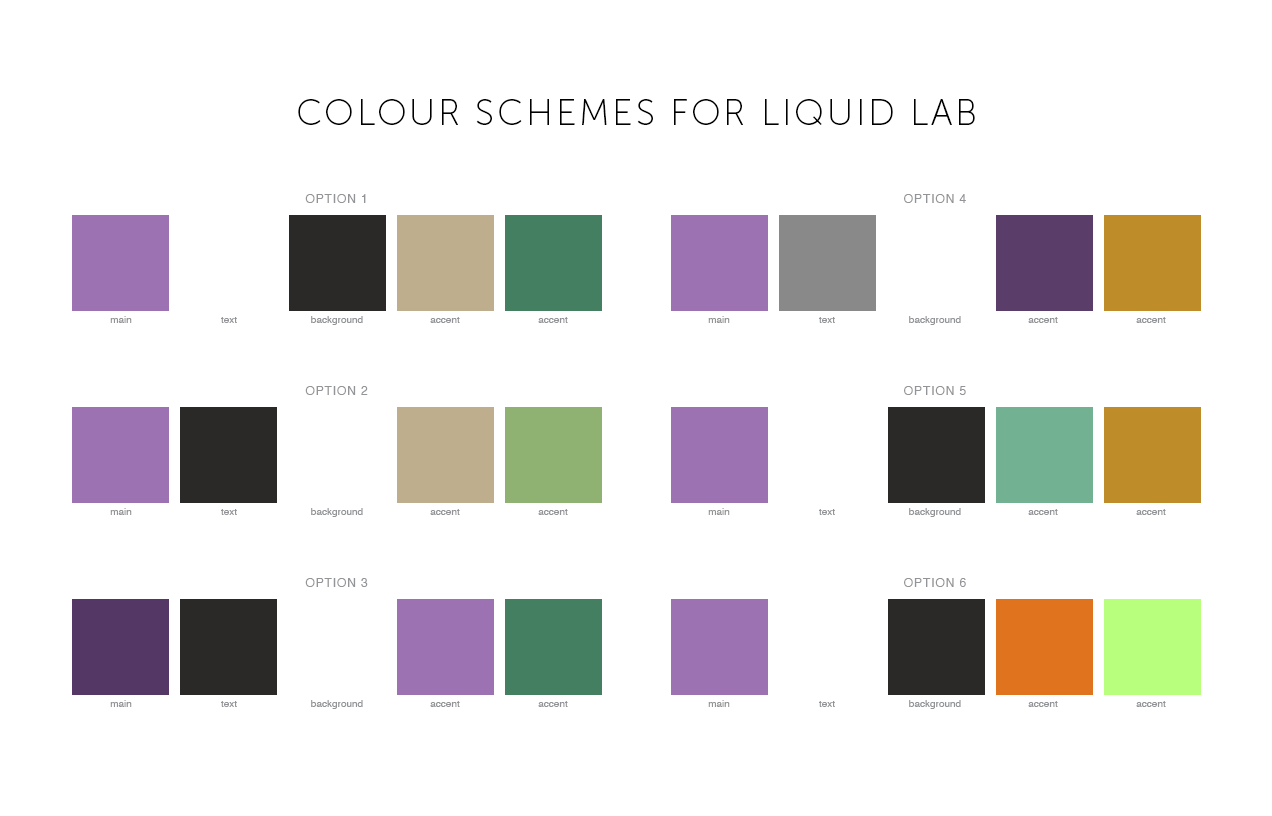
<style>
.page{position:relative;width:1272px;height:816px;background:#ffffff}
.page>*{position:absolute;margin:0}
.t1{font:36px "MuseoSans-100";letter-spacing:0.075em;color:#000000;text-transform:uppercase}
.t2{font:12px "Helvetica";letter-spacing:0.075em;color:#929497;text-transform:uppercase}
.t3{font:10px "Helvetica";color:#929497}
</style>
<div class="page">
<p class="t1" style="left:298px;top:99px;width:677px;height:26px">colour schemes for Liquid lab</p>
<p class="t2" style="left:305px;top:194px;width:61px;height:9px">OPTION 1</p>
<p class="t2" style="left:904px;top:194px;width:62px;height:9px">option 4</p>
<p class="t3" style="left:110px;top:316px;width:22px;height:7px">main</p>
<p class="t3" style="left:221px;top:317px;width:16px;height:6px">text</p>
<p class="t3" style="left:311px;top:316px;width:52px;height:9px">background</p>
<p class="t3" style="left:430px;top:317px;width:30px;height:6px">accent</p>
<p class="t3" style="left:538px;top:317px;width:30px;height:6px">accent</p>
<p class="t3" style="left:708px;top:316px;width:22px;height:7px">main</p>
<p class="t3" style="left:819px;top:317px;width:16px;height:6px">text</p>
<p class="t3" style="left:909px;top:316px;width:52px;height:9px">background</p>
<p class="t3" style="left:1028px;top:317px;width:30px;height:6px">accent</p>
<p class="t3" style="left:1136px;top:317px;width:30px;height:6px">accent</p>
<p class="t2" style="left:305px;top:386px;width:63px;height:9px">Option 2</p>
<p class="t2" style="left:904px;top:386px;width:62px;height:9px">option 5</p>
<p class="t3" style="left:110px;top:508px;width:22px;height:7px">main</p>
<p class="t3" style="left:221px;top:509px;width:16px;height:6px">text</p>
<p class="t3" style="left:311px;top:508px;width:52px;height:9px">background</p>
<p class="t3" style="left:430px;top:509px;width:30px;height:6px">accent</p>
<p class="t3" style="left:538px;top:509px;width:30px;height:6px">accent</p>
<p class="t3" style="left:708px;top:508px;width:22px;height:7px">main</p>
<p class="t3" style="left:819px;top:509px;width:16px;height:6px">text</p>
<p class="t3" style="left:909px;top:508px;width:52px;height:9px">background</p>
<p class="t3" style="left:1028px;top:509px;width:30px;height:6px">accent</p>
<p class="t3" style="left:1136px;top:509px;width:30px;height:6px">accent</p>
<p class="t2" style="left:305px;top:578px;width:63px;height:9px">Option 3</p>
<p class="t2" style="left:904px;top:578px;width:62px;height:9px">option 6</p>
<p class="t3" style="left:110px;top:700px;width:22px;height:7px">main</p>
<p class="t3" style="left:221px;top:701px;width:16px;height:6px">text</p>
<p class="t3" style="left:311px;top:700px;width:52px;height:9px">background</p>
<p class="t3" style="left:430px;top:701px;width:30px;height:6px">accent</p>
<p class="t3" style="left:538px;top:701px;width:30px;height:6px">accent</p>
<p class="t3" style="left:708px;top:700px;width:22px;height:7px">main</p>
<p class="t3" style="left:819px;top:701px;width:16px;height:6px">text</p>
<p class="t3" style="left:909px;top:700px;width:52px;height:9px">background</p>
<p class="t3" style="left:1028px;top:701px;width:30px;height:6px">accent</p>
<p class="t3" style="left:1136px;top:701px;width:30px;height:6px">accent</p>
</div>
